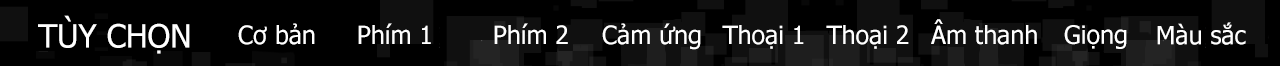
<style>
.page{position:relative;width:1280px;height:66px;background:#000000}
.page>*{position:absolute;margin:0}
.t1{font:32px "Tahoma";color:#ffffff}
.t2{font:25px "Tahoma";color:#ffffff}
</style>
<div class="page">
<p class="t1" style="left:38px;top:15px;width:152px;height:39px">TÙY CHỌN</p>
<p class="t2" style="left:238px;top:23px;width:77px;height:22px">Cơ bản</p>
<p class="t2" style="left:358px;top:23px;width:73px;height:21px">Phím 1</p>
<p class="t2" style="left:494px;top:23px;width:74px;height:21px">Phím 2</p>
<p class="t2" style="left:602px;top:23px;width:99px;height:27px">Cảm ứng</p>
<p class="t2" style="left:722px;top:25px;width:82px;height:24px">Thoại 1</p>
<p class="t2" style="left:826px;top:25px;width:83px;height:24px">Thoại 2</p>
<p class="t2" style="left:931px;top:19px;width:106px;height:26px">Âm thanh</p>
<p class="t2" style="left:1064px;top:25px;width:63px;height:24px">Giọng</p>
<p class="t2" style="left:1157px;top:22px;width:89px;height:23px">Màu sắc</p>
</div>
